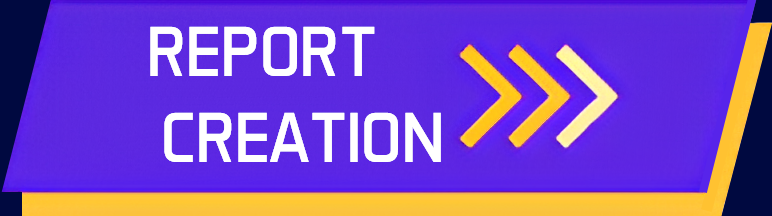
<style>
.page{position:relative;width:772px;height:216px}
.page>*{position:absolute;margin:0}
.t1{font:72px "AeroMaticsRegular";color:#ffffff}
</style>
<div class="page">
<p class="t1" style="left:150px;top:26px;width:291px;height:136px">REPORT<br> CREATION</p>
</div>
